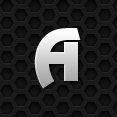
<style>
.page{position:relative;width:117px;height:117px}
.page>*{position:absolute;margin:0}
.t1{font:65px "RevueStd"}
</style>
<div class="page">
<p class="t1" style="left:34px;top:28px;width:47px;height:61px">A</p>
</div>
